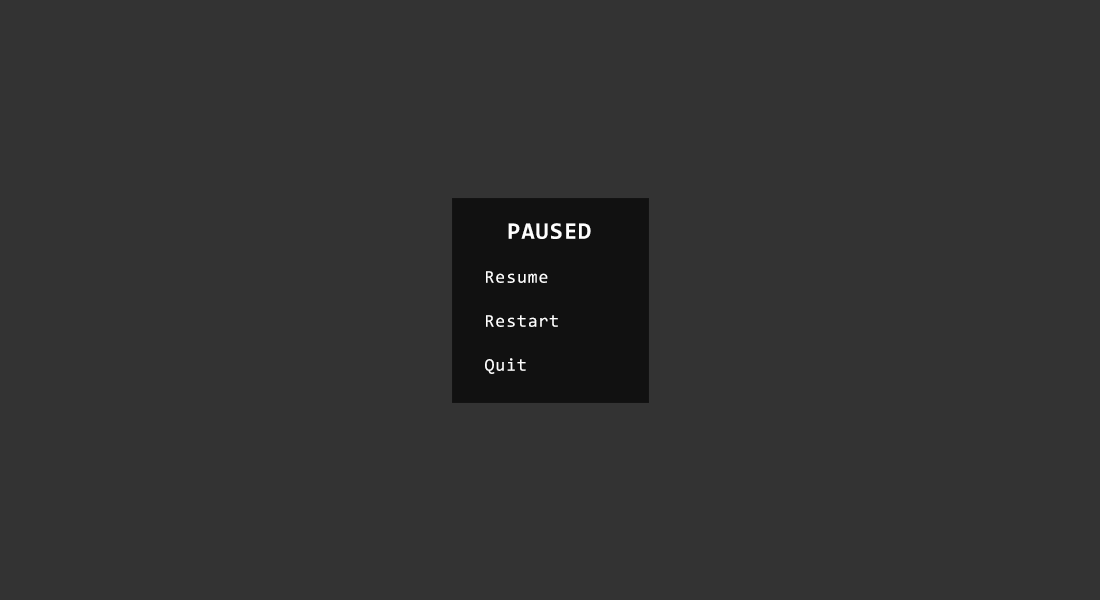
<style>
.page{position:relative;width:1100px;height:600px;background:#333333}
.page>*{position:absolute;margin:0}
.t1{font:23.7px "Consolas-Bold";letter-spacing:0.05em;color:#ffffff}
.t2{font:18px/44px "Consolas";letter-spacing:0.05em;color:#ffffff}
</style>
<div class="page">
<p class="t1" style="left:508px;top:223px;width:83px;height:16px">PAUSED</p>
<p class="t2" style="left:485px;top:271px;width:73px;height:103px">Resume<br>Restart<br>Quit</p>
</div>
